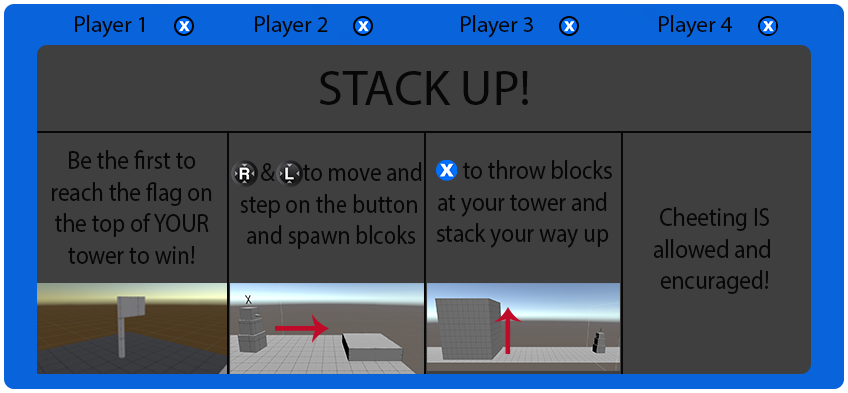
<style>
.page{position:relative;width:848px;height:393px;background:#3f3f3f}
.page>*{position:absolute;margin:0}
.t1{font:5.5px "MyriadPro-Regular";color:#070707}
.t2{font:12px "MyriadPro-Regular";color:#070707}
.t3{font:26.4px "MyriadPro-Regular";color:#070707;scale:0.88 1}
.t4{font:26.4px "MyriadPro-Regular";color:#070707;scale:0.87 1}
.t5{font:38.4px "MyriadPro-Regular";color:#070707;scale:0.87 1}
.t6{font:26.2px "MyriadPro-Regular";color:#070707;scale:0.87 1}
</style>
<div class="page">
<p class="t1" style="left:75px;top:15px;width:69px;height:23px">Player 1</p>
<p class="t1" style="left:255px;top:15px;width:73px;height:23px">Player 2</p>
<p class="t1" style="left:461px;top:15px;width:72px;height:23px">Player 3</p>
<p class="t1" style="left:659px;top:15px;width:74px;height:23px">Player 4</p>
<p class="t2" style="left:319px;top:71px;width:209px;height:34px">STACK UP!</p>
<p class="t3" style="left:52px;top:150px;width:160px;height:114px;text-align:center">Be the first to<br>reach the flag on<br>the top of YOUR<br>tower to win!</p>
<p class="t3" style="left:436px;top:160px;width:176px;height:88px;text-align:center">to throw blocks<br>at your tower and<br>stack your way up</p>
<p class="t4" style="left:240px;top:162px;width:182px;height:87px;text-align:center"><span class="t5">   </span><span class="t6">&amp;    </span>to move and<br>step on the button <br>and spawn blcoks</p>
<p class="t3" style="left:653px;top:207px;width:117px;height:87px;text-align:center">Cheeting IS<br>allowed and <br>encuraged!</p>
</div>
